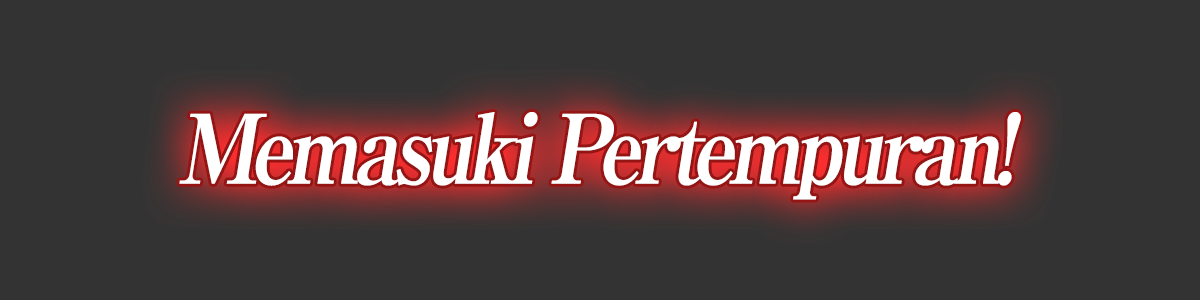
<style>
.page{position:relative;width:1200px;height:300px;background:#333333}
.page>*{position:absolute;margin:0}
.t1{font:96px "RyuminPro-ExBold";letter-spacing:-0.08em;color:#ffffff;font-style:italic;scale:0.9 1}
</style>
<div class="page">
<p class="t1" style="left:179px;top:112px;width:842px;height:88px">Memasuki Pertempuran!</p>
</div>
